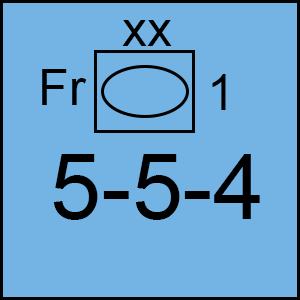
<style>
.page{position:relative;width:300px;height:300px;background:#74b4e4}
.page>*{position:absolute;margin:0}
.t1{font:50px "ArialMT";color:#000000}
.t2{font:91.7px "ArialMT";color:#000000}
</style>
<div class="page">
<p class="t1" style="left:122px;top:20px;width:50px;height:26px">xx</p>
<p class="t1" style="left:42px;top:69px;width:44px;height:36px">Fr</p>
<p class="t1" style="left:212px;top:74px;width:14px;height:36px">1</p>
<p class="t2" style="left:53px;top:154px;width:207px;height:66px">5-5-4</p>
</div>
